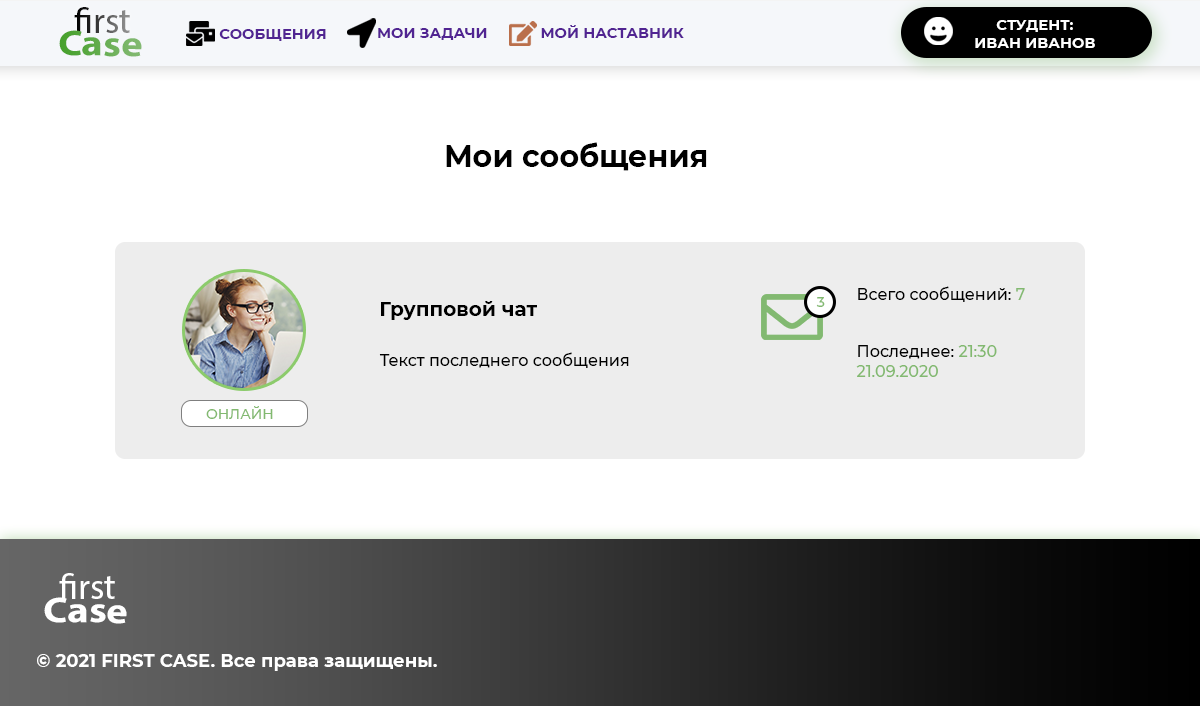
<style>
.page{position:relative;width:1200px;height:706px;background:#ffffff}
.page>*{position:absolute;margin:0}
.t1{font:36px "MyriadPro-Regular"}
.t2{font:36px "MyriadPro-Bold";scale:1.13 1}
.t3{font:36.3px "MyriadPro-Regular";scale:1.13 1}
.t4{font:14.7px "Montserrat-Bold";color:#512592;text-transform:uppercase}
.t5{font:14.7px "Montserrat-Bold";color:#512492;text-transform:uppercase}
.t6{font:14.7px "Montserrat-Bold";color:#ffffff;text-transform:uppercase}
.t7{font:30px "Montserrat-Bold";color:#000000}
.t8{font:16px "Montserrat-Medium";color:#82b970}
.t9{font:16px "Montserrat-Medium";color:#000000}
.t10{font:20px "Montserrat-Bold";color:#000000}
.t11{font:14.3px "Montserrat-Medium";color:#82b970}
.t12{font:14px "Montserrat-Medium";color:#82b970}
.t13{font:36px "MyriadPro-Regular";color:#ffffff}
.t14{font:36px "MyriadPro-Bold";color:#ffffff;scale:1.13 1}
.t15{font:36px "MyriadPro-Regular";color:#ffffff;scale:1.13 1}
.t16{font:18px "Montserrat-Bold";color:#ffffff}
</style>
<div class="page">
<p class="t1" style="left:74px;top:7px;width:56px;height:26px">first</p>
<p class="t2" style="left:59px;top:30px;width:83px;height:27px;rotate:1deg"><span class="t3">       </span>Case</p>
<p class="t4" style="left:219px;top:29px;width:107px;height:12px">СООБЩЕНИЯ</p>
<p class="t5" style="left:378px;top:28px;width:109px;height:12px">МОИ задачи</p>
<p class="t5" style="left:541px;top:25px;width:143px;height:13px">мой наставник</p>
<p class="t6" style="left:975px;top:20px;width:120px;height:28px;text-align:center">студент:<br>иВАН иВАНОВ</p>
<p class="t7" style="left:446px;top:142px;width:261px;height:29px">Мои сообщения</p>
<p class="t8" style="left:856px;top:286px;width:169px;height:91px"><span class="t9">Всего сообщений: </span>7<br><span class="t9"><br><br>Последнее: </span>21:30 <br>21.09.2020</p>
<p class="t10" style="left:381px;top:301px;width:156px;height:19px">Групповой чат</p>
<p class="t11" style="left:816px;top:297px;width:9px;height:10px">3</p>
<p class="t9" style="left:379px;top:352px;width:250px;height:16px">Текст последнего сообщения</p>
<p class="t12" style="left:206px;top:406px;width:67px;height:13px">ОНЛАЙН</p>
<p class="t13" style="left:59px;top:573px;width:56px;height:26px">first</p>
<p class="t14" style="left:44px;top:597px;width:83px;height:27px;rotate:1deg"><span class="t15">       </span>Case</p>
<p class="t16" style="left:37px;top:654px;width:400px;height:17px">© 2021 FIRST CASE. Все права защищены.</p>
</div>
